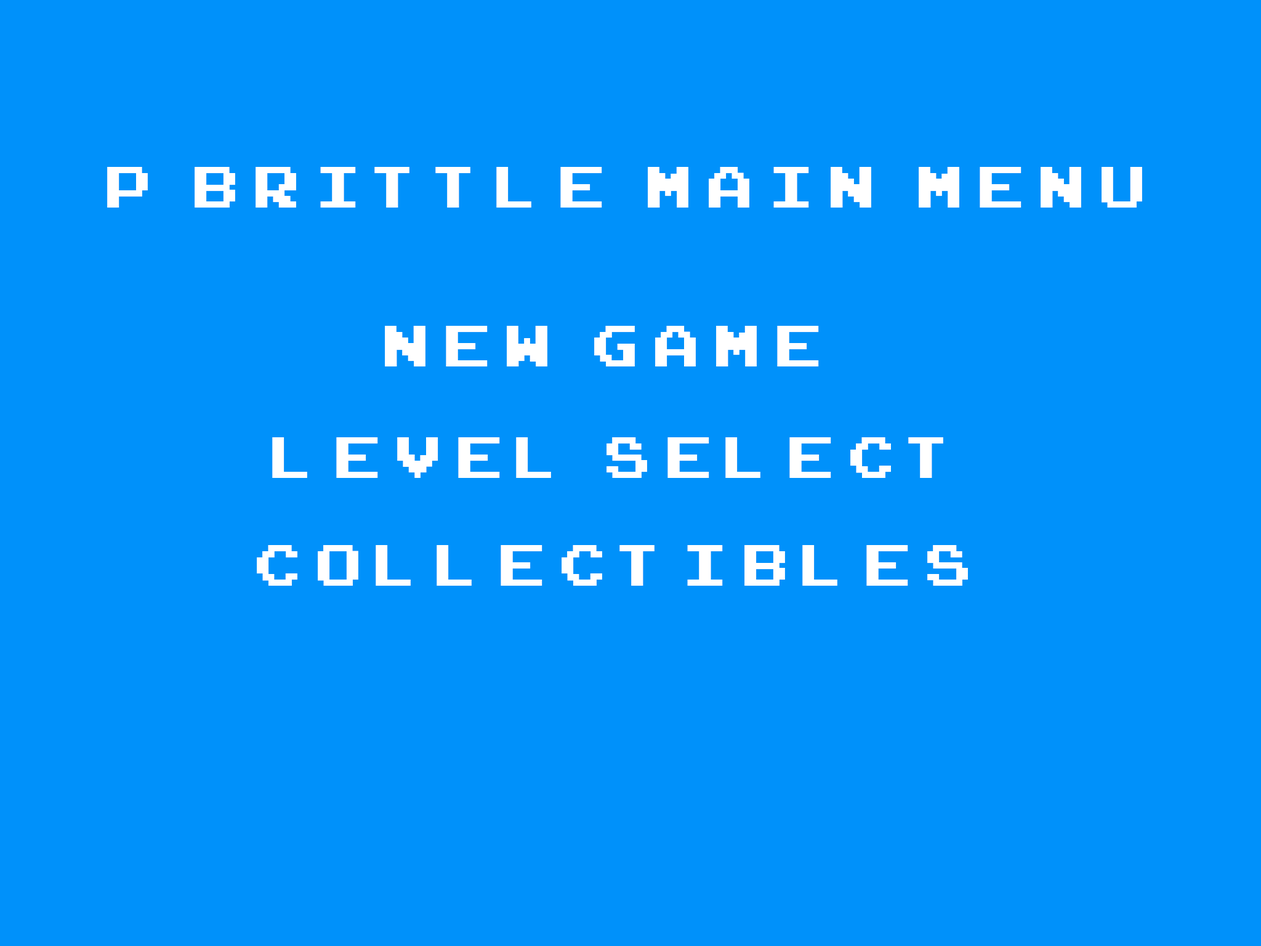
<style>
.page{position:relative;width:1261px;height:946px;background:#0091fa}
.page>*{position:absolute;margin:0}
.t1{font:81.3px "ArcadeClassic";letter-spacing:0.2em;color:#ffffff}
</style>
<div class="page">
<p class="t1" style="left:107px;top:167px;width:1035px;height:40px">P BRITTLE MAIN MENU</p>
<p class="t1" style="left:385px;top:326px;width:434px;height:40px">NEW GAME</p>
<p class="t1" style="left:272px;top:437px;width:671px;height:41px">LEVEL SELECT</p>
<p class="t1" style="left:257px;top:545px;width:711px;height:41px">COLLECTIBLES</p>
</div>
